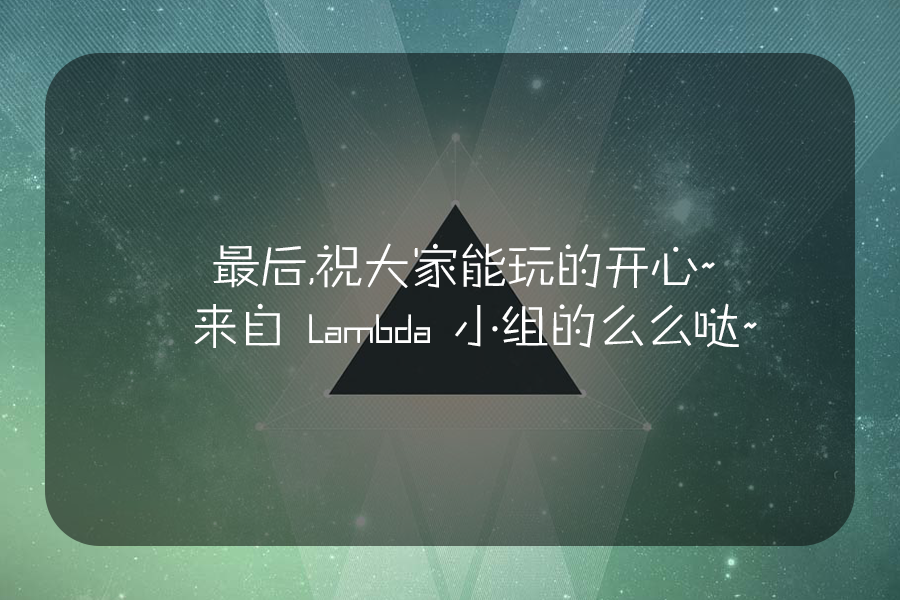
<style>
.page{position:relative;width:900px;height:600px}
.page>*{position:absolute;margin:0}
.t1{font:48px/60px "GJJZHYJW--GB1-0";color:#ffffff}
</style>
<div class="page">
<p class="t1" style="left:194px;top:243px;width:563px;height:105px;text-align:center">最后,祝大家能玩的开心~ <br>来自 Lambda 小组的么么哒~</p>
</div>
